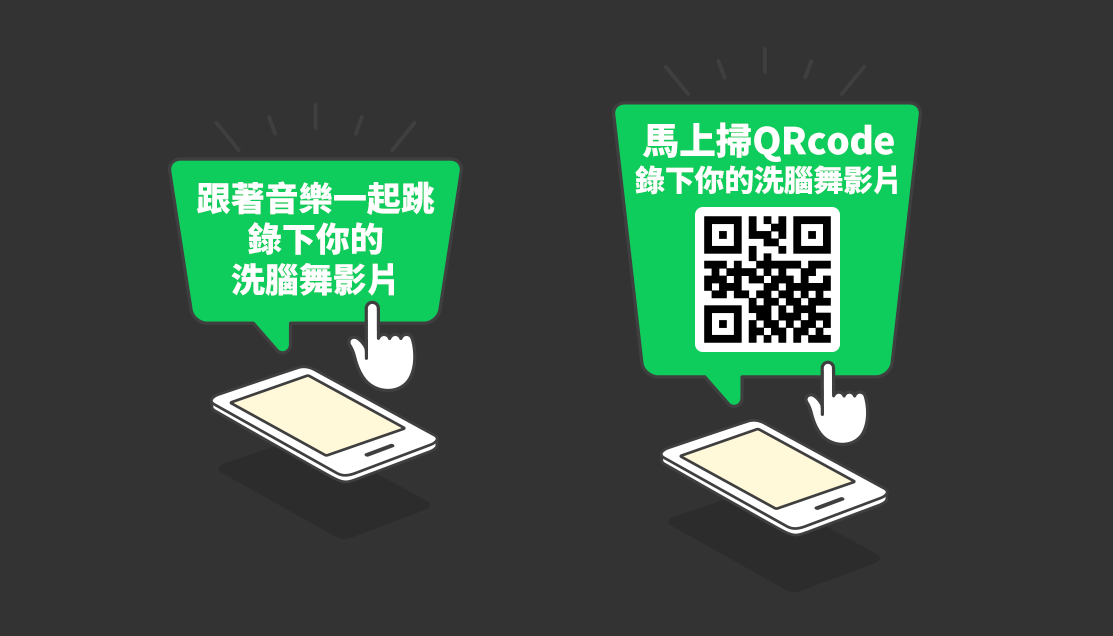
<style>
.page{position:relative;width:1113px;height:636px;background:#333333}
.page>*{position:absolute;margin:0}
.t1{font:37px/37px "SourceHanSansTC-Heavy";letter-spacing:-0.01em;color:#ffffff}
.t2{font:30px/37px "SourceHanSansTC-Heavy";letter-spacing:-0.01em;color:#ffffff}
.t3{font:34px/40.6px "SourceHanSansTC-Heavy";color:#ffffff}
</style>
<div class="page">
<p class="t1" style="left:635px;top:122px;width:262px;height:73px;text-align:center">馬上掃QRcode<br><span class="t2">錄下你的洗腦舞影片</span></p>
<p class="t3" style="left:197px;top:181px;width:238px;height:115px;text-align:center">跟著音樂一起跳<br>錄下你的<br>洗腦舞影片</p>
</div>
